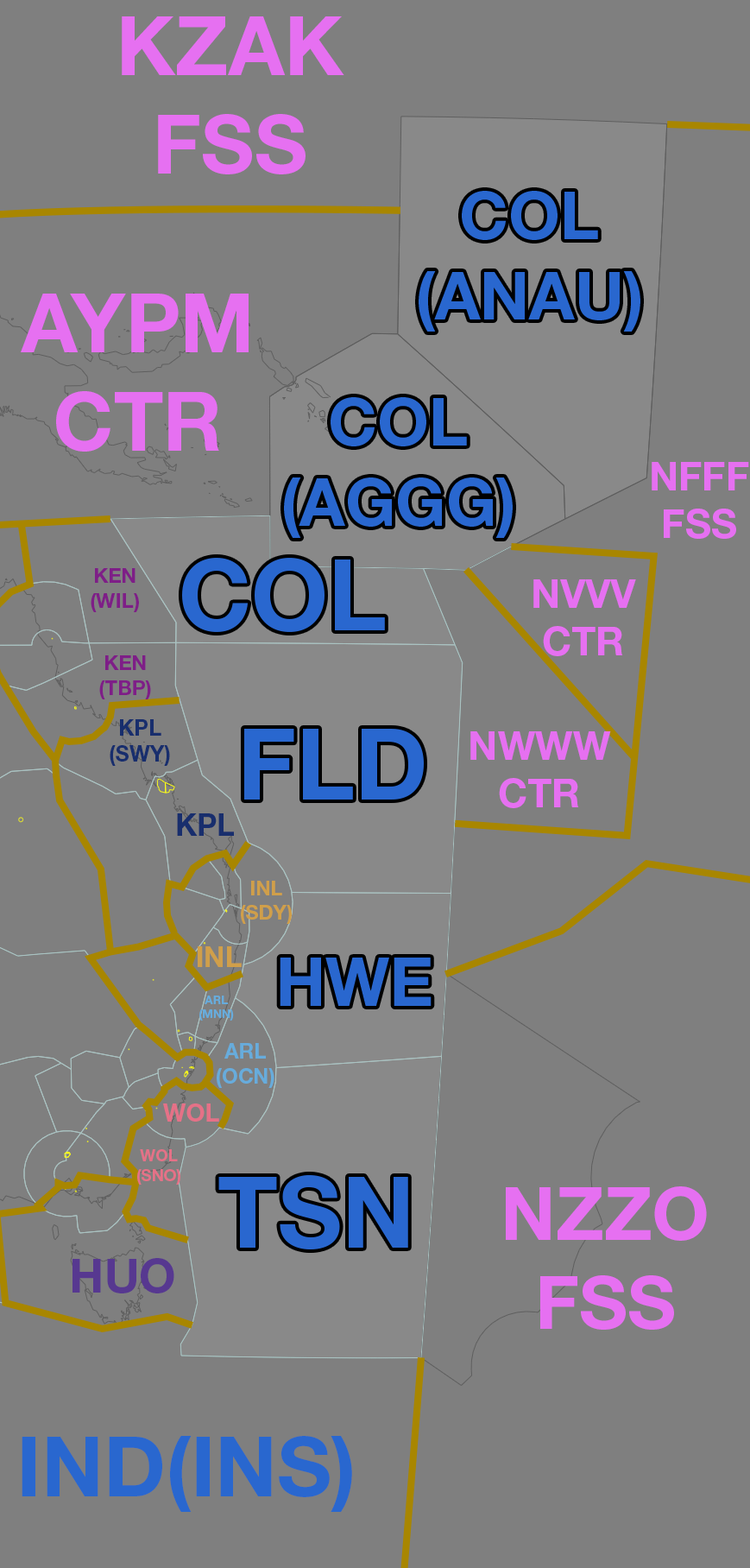
<style>
.page{position:relative;width:750px;height:1568px;background:#7f7f7f}
.page>*{position:absolute;margin:0}
.t1{font:81.7px "HelveticaNeueLTStd-Bd";color:#e670f1}
.t2{font:66.5px "HelveticaNeueLTStd-Bd";color:#2967cf}
.t3{font:39.9px "HelveticaNeueLTStd-Bd";color:#e670f1}
.t4{font:98.7px "HelveticaNeueLTStd-Bd";color:#2967cf}
.t5{font:20.6px "HelveticaNeueLTStd-Bd";color:#7e1e87}
.t6{font:21.9px "HelveticaNeueLTStd-Bd";color:#182e6d}
.t7{font:30.5px "HelveticaNeueLTStd-Bd";color:#182e6d}
.t8{font:20px "HelveticaNeueLTStd-Bd";color:#d09f4a}
.t9{font:28.8px "HelveticaNeueLTStd-Bd";color:#d09f4a}
.t10{font:67.9px "HelveticaNeueLTStd-Bd";color:#2967cf}
.t11{font:11.8px "HelveticaNeueLTStd-Bd";color:#67acdc}
.t12{font:20.8px "HelveticaNeueLTStd-Bd";color:#67acdc}
.t13{font:24.7px "HelveticaNeueLTStd-Bd";color:#e57187}
.t14{font:16.5px "HelveticaNeueLTStd-Bd";color:#e57187}
.t15{font:74.2px "HelveticaNeueLTStd-Bd";color:#e670f1}
.t16{font:47.2px "HelveticaNeueLTStd-Bd";color:#573890}
.t17{font:83.9px "HelveticaNeueLTStd-Bd";color:#2967cf}
</style>
<div class="page">
<p class="t1" style="left:122px;top:16px;width:223px;height:158px;text-align:center">KZAK<br>FSS</p>
<p class="t2" style="left:419px;top:191px;width:222px;height:141px;text-align:center">COL<br>(ANAU)</p>
<p class="t1" style="left:21px;top:294px;width:228px;height:158px;text-align:center">AYPM<br>CTR</p>
<p class="t2" style="left:284px;top:397px;width:229px;height:141px;text-align:center">COL<br>(AGGG)</p>
<p class="t3" style="left:652px;top:462px;width:97px;height:77px;text-align:center">NFFF<br>FSS</p>
<p class="t4" style="left:182px;top:558px;width:203px;height:74px">COL</p>
<p class="t5" style="left:91px;top:568px;width:48px;height:44px;text-align:center">KEN<br>(WIL)</p>
<p class="t3" style="left:534px;top:579px;width:102px;height:77px;text-align:center">NVVV<br>CTR</p>
<p class="t5" style="left:99px;top:655px;width:52px;height:44px;text-align:center">KEN<br>(TBP)</p>
<p class="t6" style="left:110px;top:719px;width:60px;height:47px;text-align:center">KPL<br>(SWY)</p>
<p class="t4" style="left:244px;top:729px;width:180px;height:71px">FLD</p>
<p class="t3" style="left:471px;top:731px;width:140px;height:77px;text-align:center">NWWW<br>CTR</p>
<p class="t7" style="left:177px;top:813px;width:57px;height:23px">KPL</p>
<p class="t8" style="left:241px;top:881px;width:51px;height:43px;text-align:center">INL<br>(SDY)</p>
<p class="t9" style="left:198px;top:946px;width:44px;height:21px">INL</p>
<p class="t10" style="left:280px;top:958px;width:152px;height:48px">HWE</p>
<p class="t11" style="left:199px;top:996px;width:35px;height:25px;text-align:center">ARL<br>(MNN)</p>
<p class="t12" style="left:217px;top:1043px;width:58px;height:45px;text-align:center">ARL<br>(OCN)</p>
<p class="t13" style="left:163px;top:1103px;width:56px;height:19px">WOL</p>
<p class="t14" style="left:137px;top:1149px;width:43px;height:36px;text-align:center">WOL<br>(SNO)</p>
<p class="t4" style="left:218px;top:1175px;width:190px;height:74px">TSN</p>
<p class="t15" style="left:506px;top:1186px;width:201px;height:144px;text-align:center">NZZO<br>FSS</p>
<p class="t16" style="left:73px;top:1258px;width:101px;height:35px">HUO</p>
<p class="t17" style="left:22px;top:1436px;width:330px;height:76px">IND(INS)</p>
</div>
